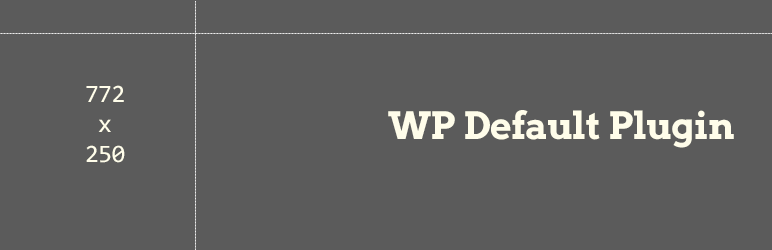
<style>
.page{position:relative;width:772px;height:250px;background:#5b5b5b}
.page>*{position:absolute;margin:0}
.t1{font:25px "Consolas";letter-spacing:-0.02em;color:#fffdea}
.t2{font:37.5px "ArvoGr00FCn";letter-spacing:-0.02em;color:#fffdea}
</style>
<div class="page">
<p class="t1" style="left:86px;top:85px;width:39px;height:78px;text-align:center">772<br>x<br>250</p>
<p class="t2" style="left:388px;top:110px;width:346px;height:38px">WP Default Plugin</p>
</div>
